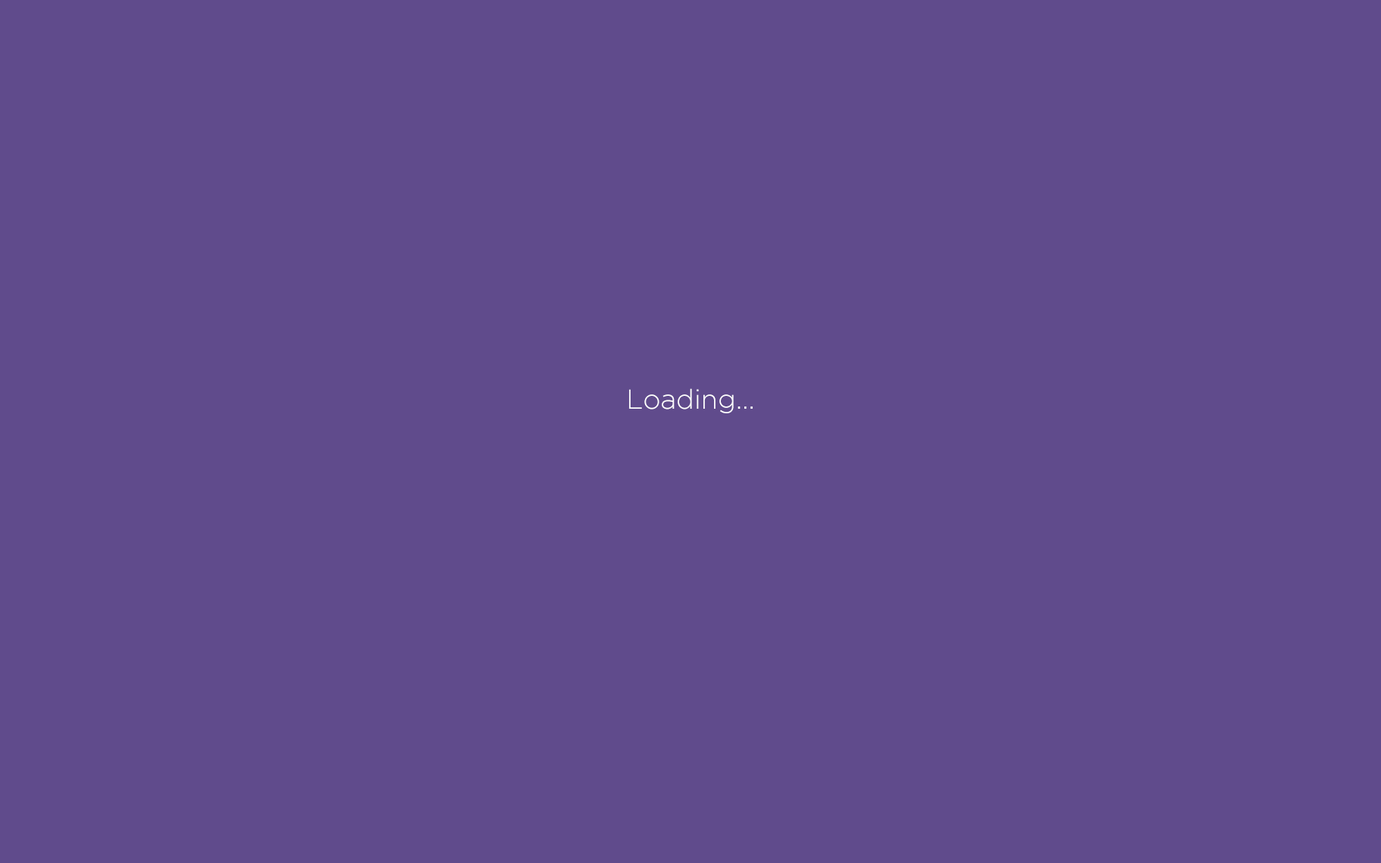
<style>
.page{position:relative;width:1381px;height:863px;background:#604b8c}
.page>*{position:absolute;margin:0}
.t1{font:27.3px "Gotham-Light";color:#ffffff}
</style>
<div class="page">
<p class="t1" style="left:629px;top:388px;width:124px;height:26px">Loading...</p>
</div>
